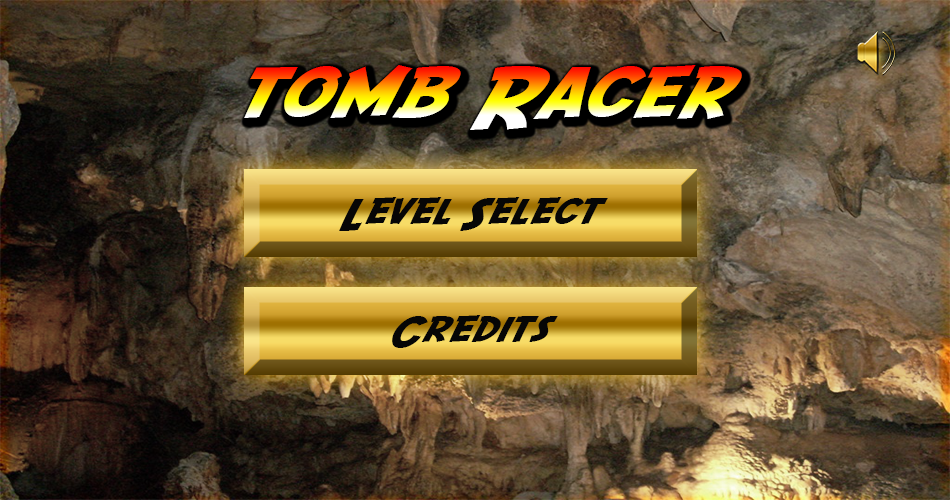
<style>
.page{position:relative;width:950px;height:500px}
.page>*{position:absolute;margin:0}
.t1{font:72px "SFFedora";letter-spacing:-0.005em;scale:1.2 1}
.t2{font:36px "SFFedora";letter-spacing:-0.005em;color:#060606;scale:1.2 1}
</style>
<div class="page">
<p class="t1" style="left:244px;top:65px;width:498px;height:65px">tomb Racer</p>
<p class="t2" style="left:339px;top:197px;width:269px;height:34px">Level Select</p>
<p class="t2" style="left:392px;top:315px;width:166px;height:33px">Credits</p>
</div>
